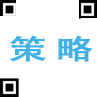
<style>
.page{position:relative;width:97px;height:97px;background:#ffffff}
.page>*{position:absolute;margin:0}
.t1{font:27.9px "AdobeHeitiStd-Regular";letter-spacing:-0.02em;color:#42b1e5;font-weight:bold;scale:1.37 1}
</style>
<div class="page">
<p class="t1" style="left:10px;top:35px;width:83px;height:27px">策 略</p>
</div>
